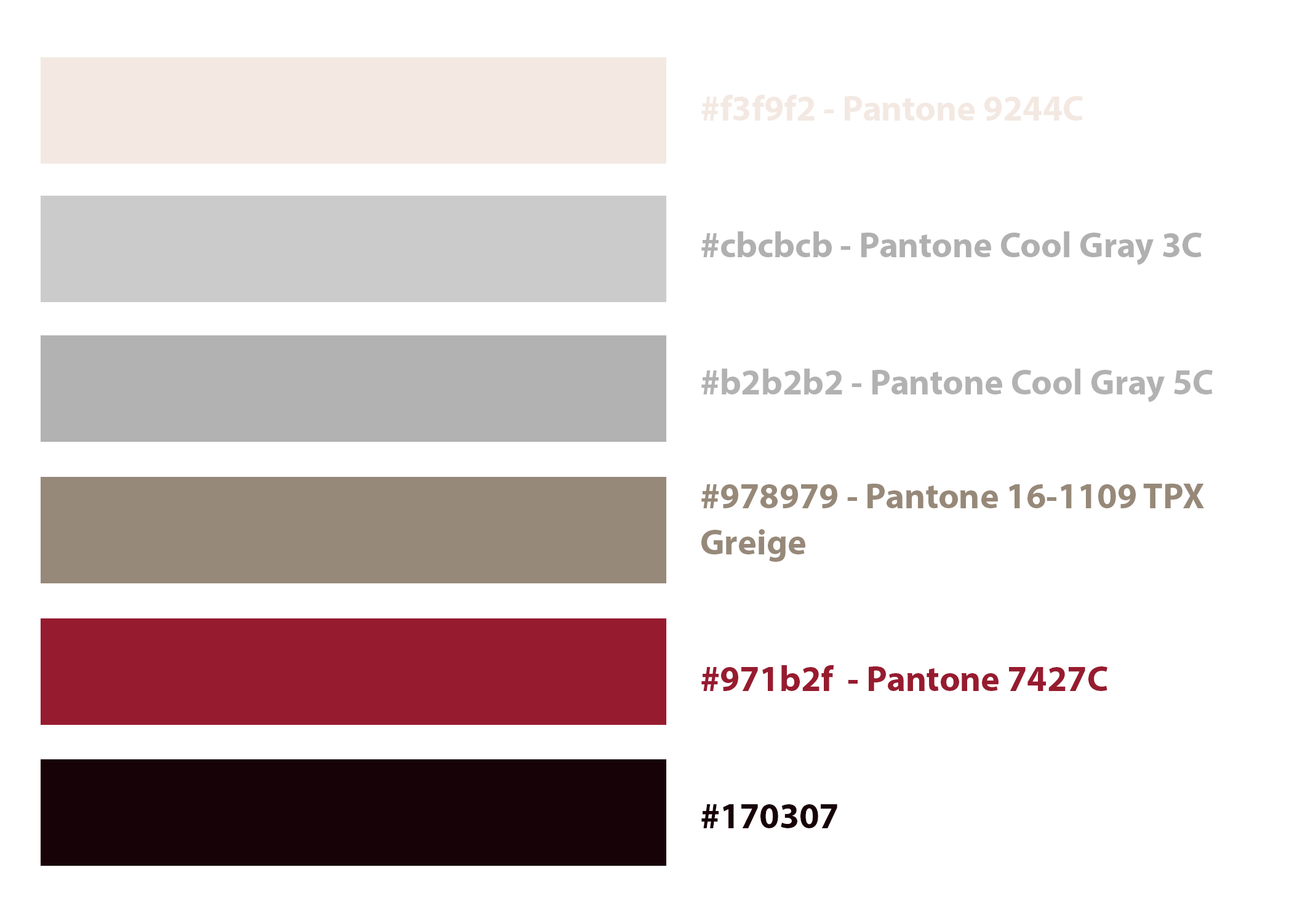
<style>
.page{position:relative;width:1292px;height:923px;background:#ffffff}
.page>*{position:absolute;margin:0}
.t1{font:35.9px "MyriadPro-Bold";color:#978979}
.t2{font:35.9px "MyriadPro-Bold";color:#f3e9e2}
.t3{font:35.9px "MyriadPro-Bold";color:#b0b0b0}
.t4{font:35.9px "MyriadPro-Bold";color:#b2b2b2}
.t5{font:35.9px "MyriadPro-Bold";color:#971b2f}
.t6{font:35.9px "MyriadPro-Bold";color:#170307}
</style>
<div class="page">
<p class="t1" style="left:701px;top:95px;width:512px;height:733px"><span class="t2">#f3f9f2 - Pantone 9244C<br></span><span class="t3"><br><br>#cbcbcb - Pantone Cool Gray 3C<br><br><br></span><span class="t4">#b2b2b2 - Pantone Cool Gray 5C<br><br></span>#978979 - Pantone 16-1109 TPX<br>Greige<br><br><span class="t5"><br>#971b2f  - Pantone 7427C<br><br><br></span><span class="t6">#170307</span></p>
</div>
